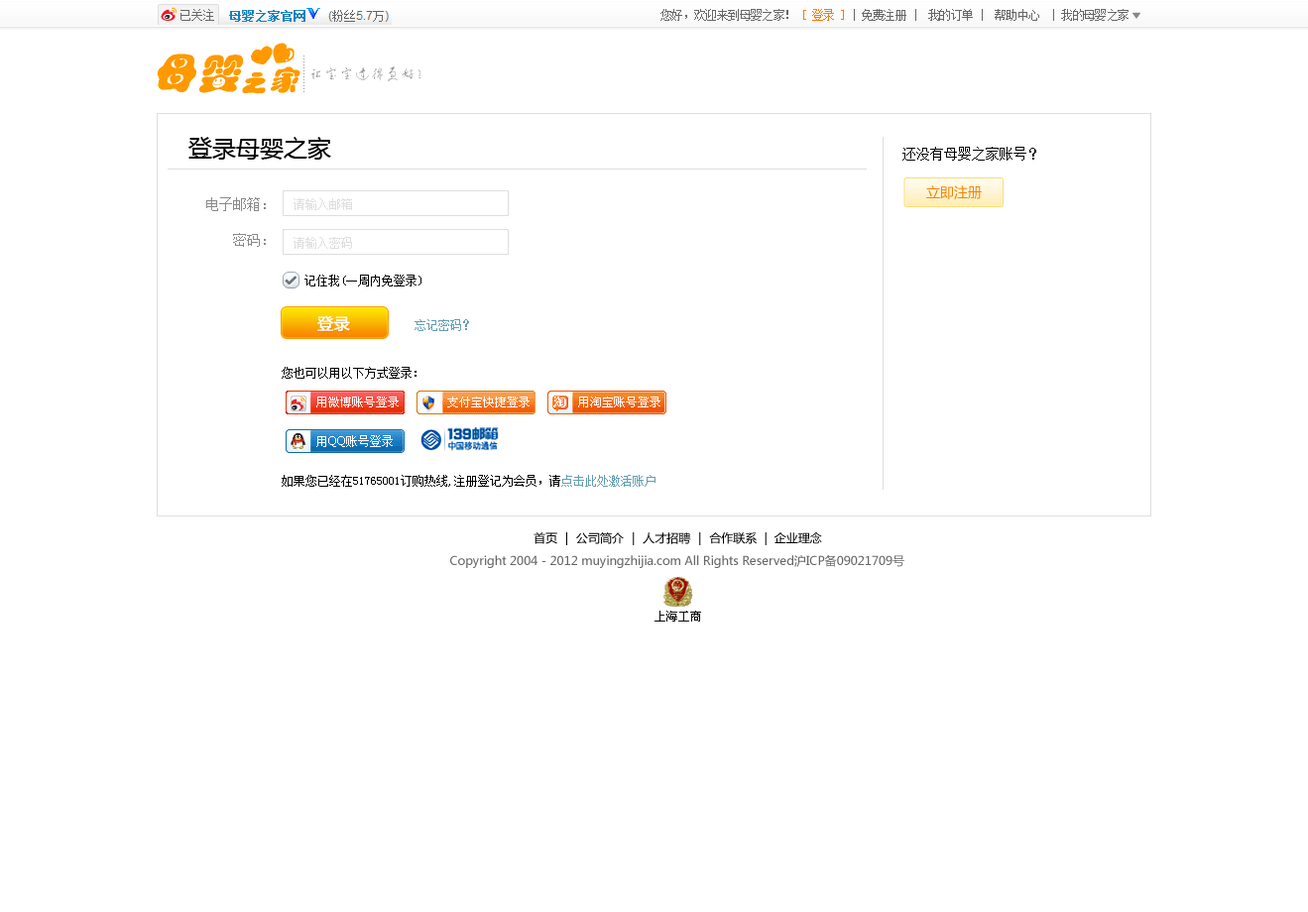
<style>
.page{position:relative;width:1308px;height:912px;background:#ffffff}
.page>*{position:absolute;margin:0}
.t1{font:11.9px "SimSun";letter-spacing:-0.05em;color:#666666}
.t2{font:11.9px "SimSun";letter-spacing:-0.05em;color:#ff7800}
.t3{font:23.8px "MicrosoftYaHei";color:#000000}
.t4{font:13.9px "SimSun";color:#000000}
.t5{font:13.9px "MicrosoftYaHei";color:#f78000}
.t6{font:13.9px/35.7px "SimSun";color:#898989}
.t7{font:13.9px/35.7px "MicrosoftYaHei";color:#898989}
.t8{font:11.9px "SimSun";color:#dedede}
.t9{font:13.9px "Pictos";color:#687280}
.t10{font:11.9px "SimSun";color:#000000}
.t11{font:15.9px "MicrosoftYaHei";color:#ffffff;font-weight:bold}
.t12{font:11.9px "SimSun";color:#619eb1}
.t13{font:11.9px "MicrosoftYaHei";color:#000000}
.t14{font:11.9px "MicrosoftYaHei";color:#666666}
</style>
<div class="page">
<p class="t1" style="left:660px;top:9px;width:468px;height:12px">您好，欢迎来到母婴之家！ <span class="t2">[ 登录 ]</span> | 免费注册 |  我的订单 |  帮助中心  | 我的母婴之家</p>
<p class="t3" style="left:188px;top:137px;width:143px;height:23px">登录母婴之家</p>
<p class="t4" style="left:902px;top:147px;width:134px;height:14px">还没有母婴之家账号？</p>
<p class="t5" style="left:926px;top:185px;width:55px;height:14px">立即注册</p>
<p class="t6" style="left:206px;top:197px;width:60px;height:50px;text-align:right"><span class="t7"><br></span>电子邮箱：<br>密码：</p>
<p class="t8" style="left:293px;top:198px;width:59px;height:12px">请输入邮箱</p>
<p class="t8" style="left:293px;top:237px;width:59px;height:12px">请输入密码</p>
<p class="t9" style="left:285px;top:276px;width:11px;height:9px">3</p>
<p class="t10" style="left:304px;top:275px;width:117px;height:11px">记住我(一周内免登录)</p>
<p class="t11" style="left:317px;top:315px;width:33px;height:17px">登录</p>
<p class="t12" style="left:414px;top:319px;width:55px;height:12px">忘记密码？</p>
<p class="t10" style="left:282px;top:367px;width:134px;height:12px">您也可以用以下方式登录：</p>
<p class="t10" style="left:282px;top:475px;width:373px;height:12px">如果您已经在51765001订购热线,注册登记为会员，请<span class="t12">点击此处激活账户</span></p>
<p class="t13" style="left:533px;top:532px;width:289px;height:13px">首页 ｜ 公司简介 ｜ 人才招聘 ｜ 合作联系  |  企业理念</p>
<p class="t14" style="left:450px;top:554px;width:454px;height:14px">Copyright 2004 - 2012 muyingzhijia.com All Rights Reserved沪ICP备09021709号</p>
</div>
